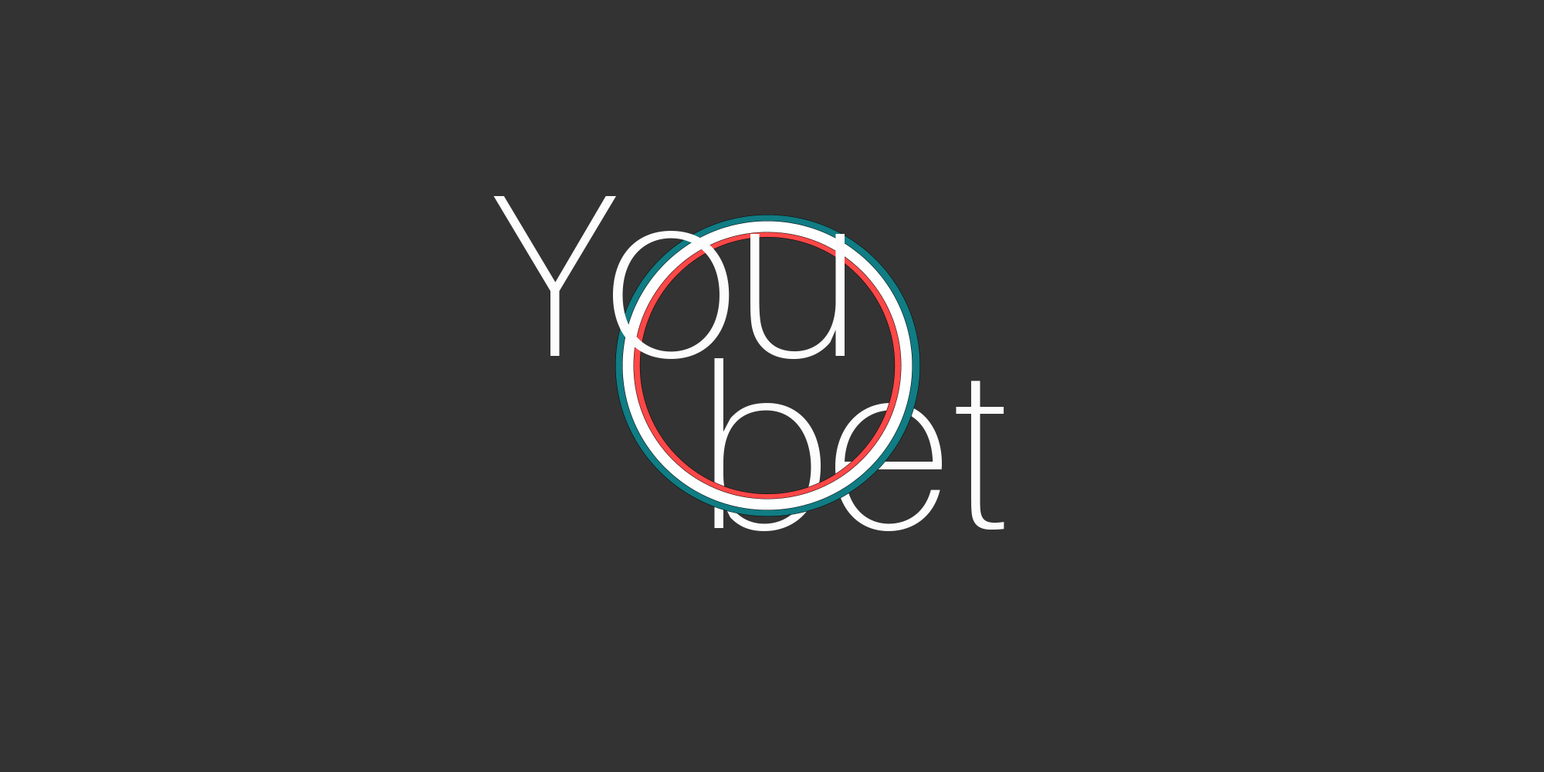
<style>
.page{position:relative;width:1544px;height:772px;background:#333333}
.page>*{position:absolute;margin:0}
.t1{font:231.6px "Aileron-Thin";color:#fcfcfc}
</style>
<div class="page">
<p class="t1" style="left:493px;top:196px;width:352px;height:164px">You</p>
<p class="t1" style="left:714px;top:358px;width:291px;height:173px">bet</p>
</div>
